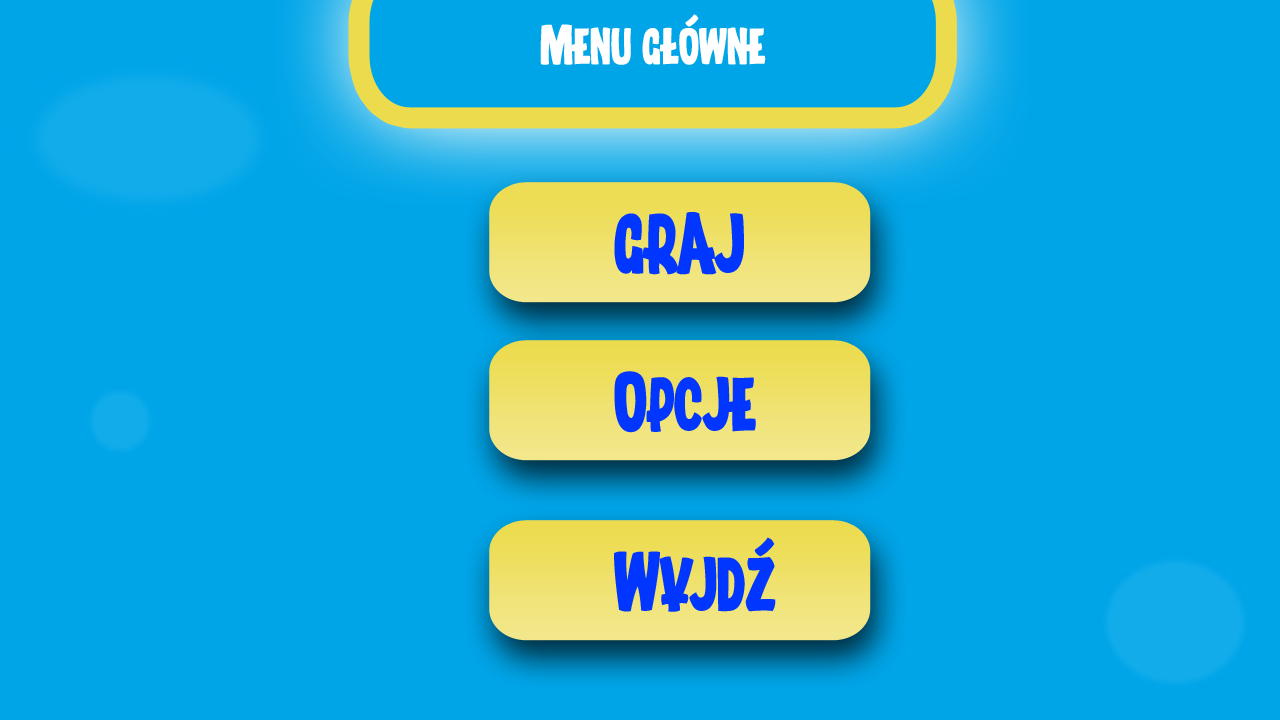
<style>
.page{position:relative;width:1280px;height:720px;background:#00a5e8}
.page>*{position:absolute;margin:0}
.t1{font:48px "Tygodnik";color:#ffffff}
.t2{font:72px "Tygodnik";color:#0036ff}
</style>
<div class="page">
<p class="t1" style="left:540px;top:14px;width:226px;height:51px">Menu główne</p>
<p class="t2" style="left:614px;top:212px;width:130px;height:63px">GRAJ</p>
<p class="t2" style="left:614px;top:371px;width:142px;height:62px">Opcje</p>
<p class="t2" style="left:614px;top:537px;width:162px;height:75px">Wyjdź</p>
</div>
